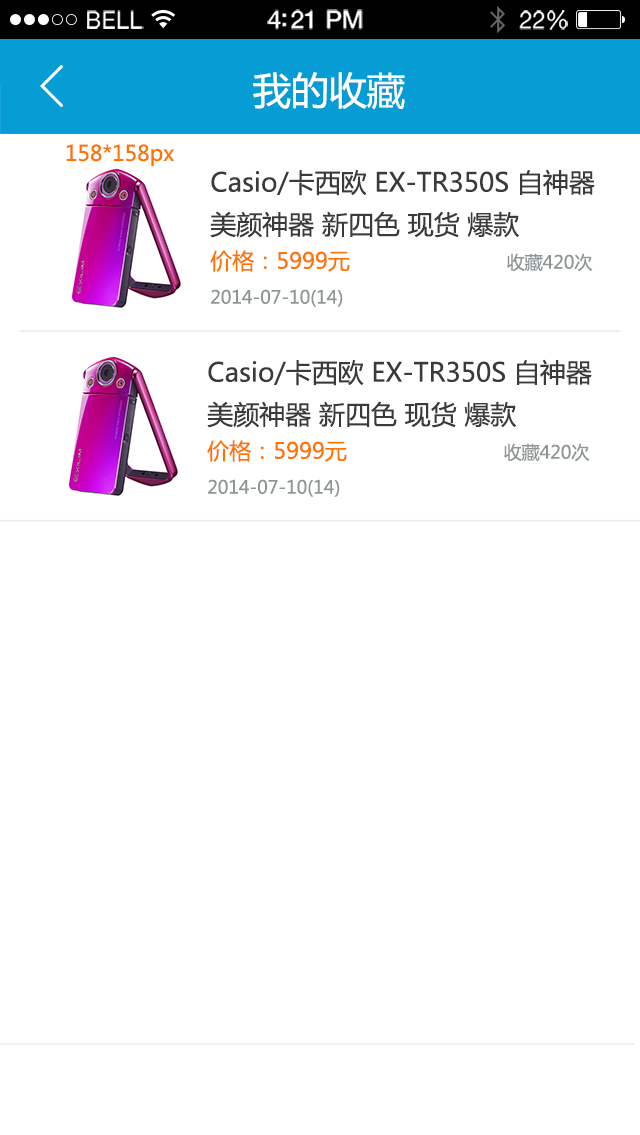
<style>
.page{position:relative;width:640px;height:1135px;background:#ffffff}
.page>*{position:absolute;margin:0}
.t1{font:23.1px "HelveticaNeue";letter-spacing:0.02em;color:#ffffff}
.t2{font:25.1px "HelveticaNeue-Medium";letter-spacing:-0.02em;color:#ffffff}
.t3{font:24.1px "HelveticaNeue";letter-spacing:-0.02em;color:#ffffff}
.t4{font:38px "MicrosoftYaHei";color:#ffffff}
.t5{font:33.8px "MicrosoftYaHei";color:#ffffff}
.t6{font:21.3px "MicrosoftYaHei";color:#ff7300}
.t7{font:26px/4px "MicrosoftYaHei";color:#3a3a3a}
.t8{font:22px/4px "MicrosoftYaHei";color:#ff7300}
.t9{font:18px/4px "MicrosoftYaHei";color:#8d9695}
</style>
<div class="page">
<p class="t1" style="left:87px;top:10px;width:57px;height:19px">BELL</p>
<p class="t2" style="left:267px;top:9px;width:96px;height:21px">4:21 PM</p>
<p class="t3" style="left:519px;top:10px;width:49px;height:20px">22%</p>
<p class="t4" style="left:253px;top:72px;width:152px;height:38px"><span class="t5">   </span>我的收藏</p>
<p class="t6" style="left:66px;top:144px;width:108px;height:23px">158*158px</p>
<p class="t7" style="left:210px;top:169px;width:385px;height:138px">Casio/卡西欧 EX-TR350S 自神器<br><br><br><br><br><br>美颜神器 新四色 现货 爆款 <br><br><br><br><br><span class="t8">价格：5999元                             </span><span class="t9">收藏420次<br><br><br><br><br>2014-07-10(14)</span></p>
<p class="t7" style="left:207px;top:359px;width:385px;height:138px">Casio/卡西欧 EX-TR350S 自神器<br><br><br><br><br><br>美颜神器 新四色 现货 爆款 <br><br><br><br><br><span class="t8">价格：5999元                             </span><span class="t9">收藏420次<br><br><br><br><br>2014-07-10(14)</span></p>
</div>
